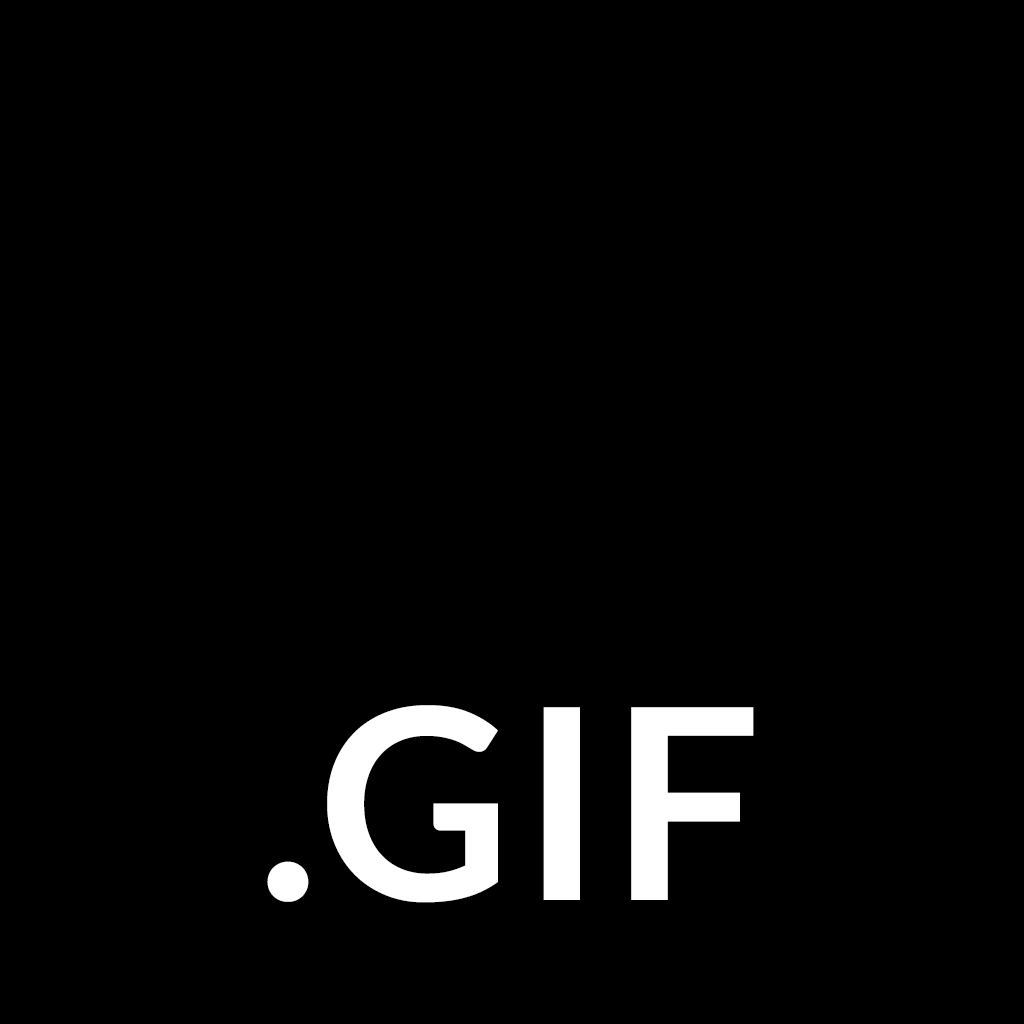
<style>
.page{position:relative;width:1024px;height:1024px;background:#000000}
.page>*{position:absolute;margin:0}
.t1{font:266.4px "Lato-Bold";letter-spacing:0.03em;color:#ffffff}
</style>
<div class="page">
<p class="t1" style="left:267px;top:705px;width:487px;height:198px">.GIF</p>
</div>
